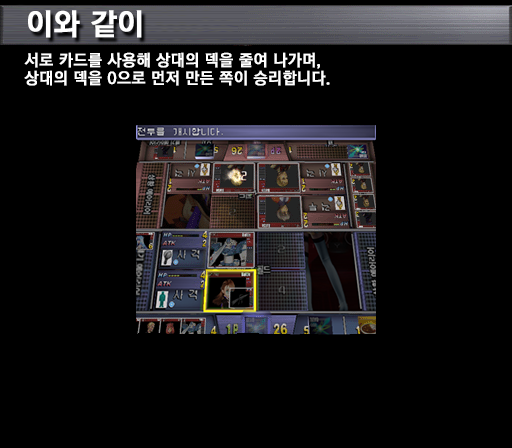
<style>
.page{position:relative;width:512px;height:448px;background:#000000}
.page>*{position:absolute;margin:0}
.t1{font:30px "KoreanGD15-R";color:#ffffff;font-weight:bold}
.t2{font:16px/18px "KoreanGD15-R";color:#ffffff;font-weight:bold}
</style>
<div class="page">
<p class="t1" style="left:28px;top:10px;width:114px;height:28px">이와 같이</p>
<p class="t2" style="left:24px;top:52px;width:306px;height:34px">서로 카드를 사용해 상대의 덱을 줄여 나가며,<br>상대의 덱을 0으로 먼저 만든 쪽이 승리합니다.</p>
</div>
